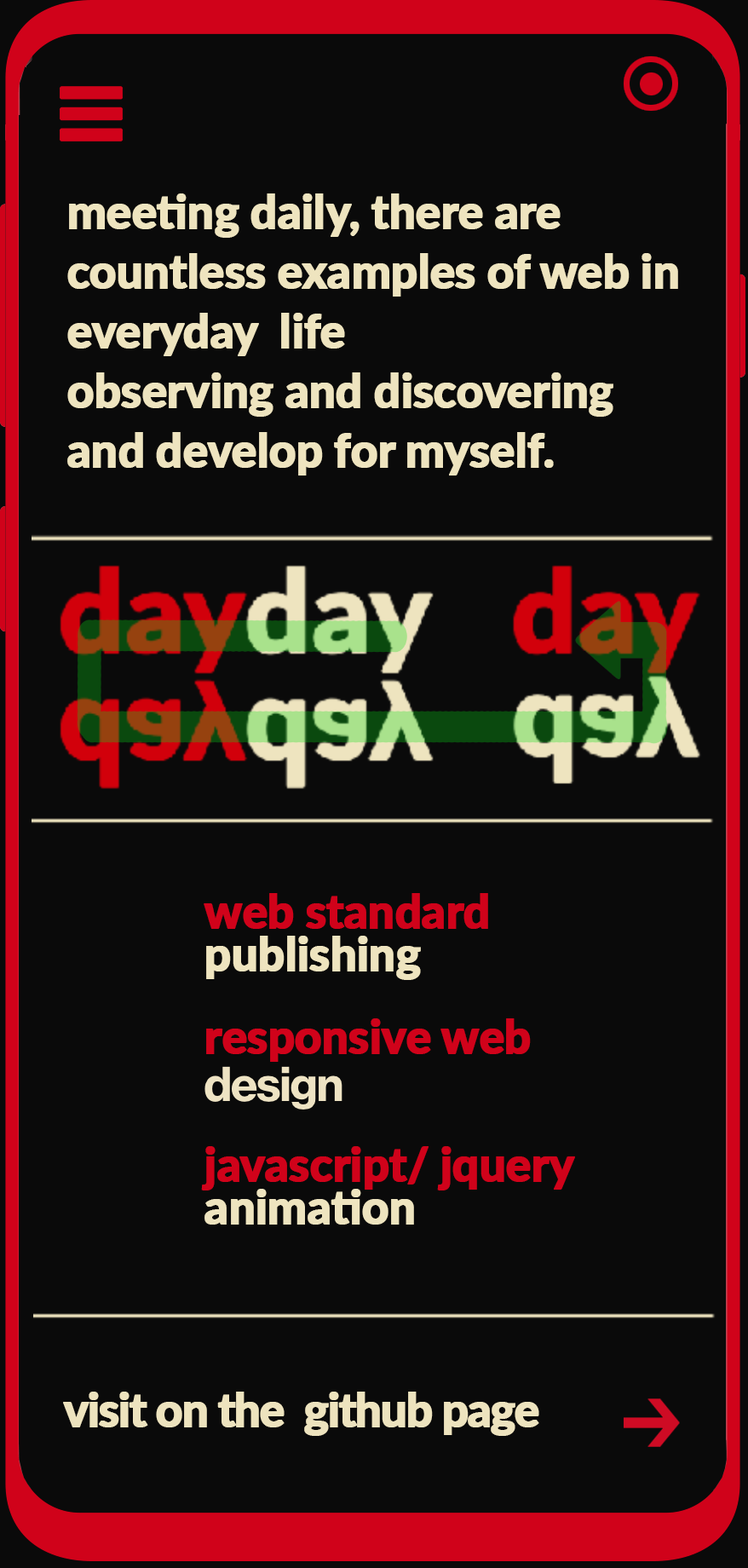
<style>
.page{position:relative;width:748px;height:1568px;background:#0a0a0a}
.page>*{position:absolute;margin:0}
.t1{font:46.9px/59.7px "Lato-Heavy";letter-spacing:-0.025em;color:#eee4bf;font-weight:bold}
.t2{font:46.9px "Lato-Heavy";letter-spacing:-0.025em;color:#d0021a;font-weight:bold}
.t3{font:46.9px "Lato-Heavy";letter-spacing:-0.025em;color:#eee4bf;font-weight:bold}
.t4{font:46.9px "Lato-Heavy";letter-spacing:-0.05em;color:#ede3be;font-weight:bold}
</style>
<div class="page">
<p class="t1" style="left:67px;top:193px;width:611px;height:283px">meeting daily, there are countless examples of web in everyday  life <br>observing and discovering and develop for myself.<br>Experiencing technical skills:<br>HTML CSS JAVASCRIPT JQUERY</p>
<p class="t2" style="left:204px;top:893px;width:284px;height:36px">web standard</p>
<p class="t3" style="left:206px;top:936px;width:215px;height:44px">publishing</p>
<p class="t2" style="left:206px;top:1018px;width:325px;height:44px">responsive web</p>
<p class="t2" style="left:201px;top:1146px;width:374px;height:44px">javascript/ jquery</p>
<p class="t3" style="left:205px;top:1189px;width:209px;height:36px">animation</p>
<p class="t4" style="left:63px;top:1392px;width:476px;height:44px">visit on the  github page</p>
</div>
